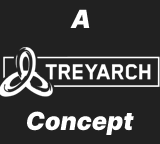
<style>
.page{position:relative;width:160px;height:144px;background:#212121}
.page>*{position:absolute;margin:0}
.t1{font:25px "InterUI-BlackItalic";color:#ffffff}
</style>
<div class="page">
<p class="t1" style="left:70px;top:9px;width:20px;height:19px">A</p>
<p class="t1" style="left:26px;top:111px;width:108px;height:25px">Concept</p>
</div>
